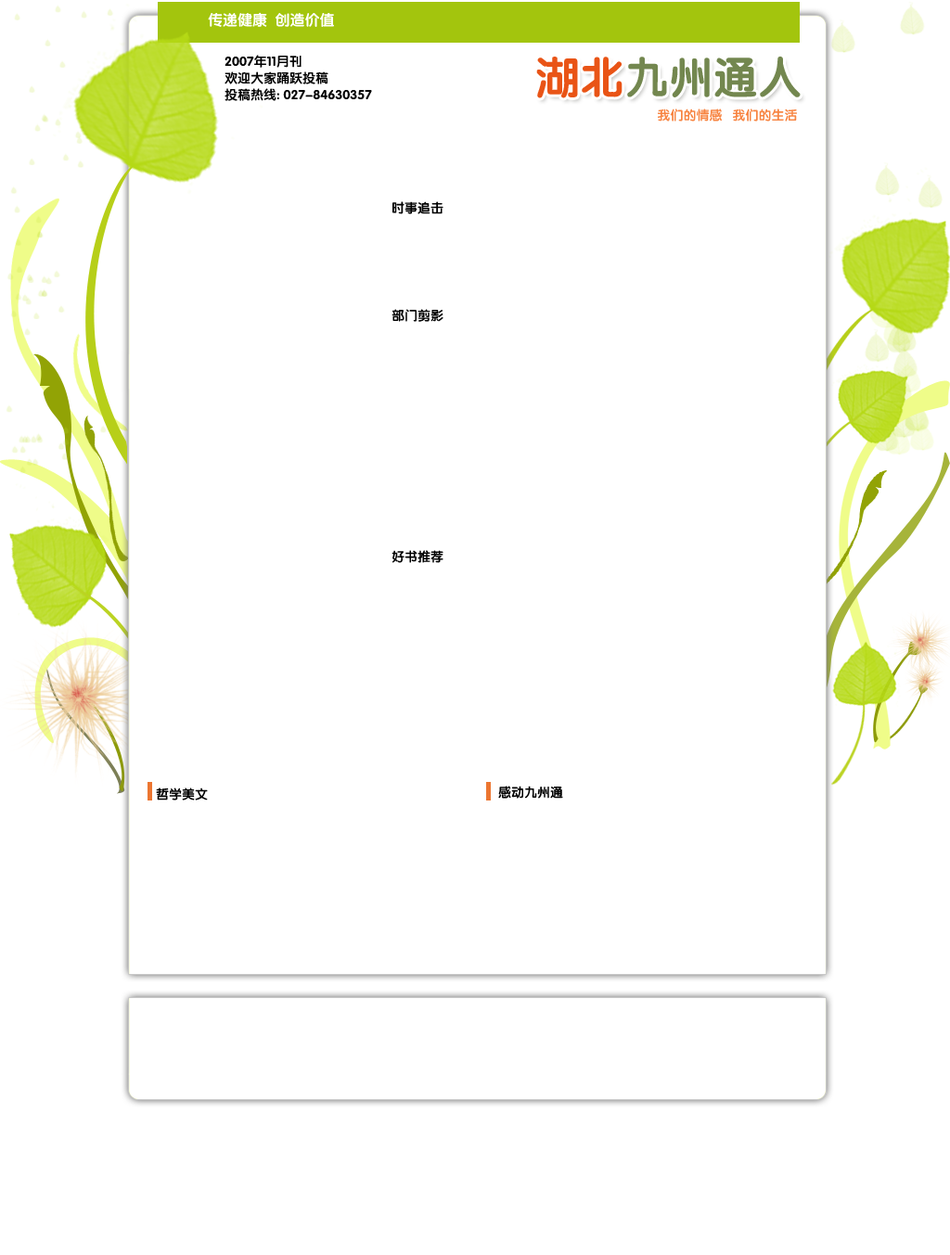
<style>
.page{position:relative;width:950px;height:1255px;background:#ffffff}
.page>*{position:absolute;margin:0}
.t1{font:14.8px "FZY4JW--GB1-0";color:#ffffff}
.t2{font:13px/16.7px "FZY4JW--GB1-0";color:#000000}
.t3{font:44.5px "FZY4JW--GB1-0";color:#73874f}
.t4{font:44.5px "FZY4JW--GB1-0";color:#e95416}
.t5{font:13px "FZY4JW--GB1-0";color:#f78441}
.t6{font:13px "FZY4JW--GB1-0";color:#000000}
</style>
<div class="page">
<p class="t1" style="left:208px;top:12px;width:126px;height:15px">传递健康  创造价值</p>
<p class="t2" style="left:225px;top:55px;width:147px;height:46px">2007年11月刊<br>欢迎大家踊跃投稿<br>投稿热线: 027-84630357</p>
<p class="t3" style="left:536px;top:56px;width:265px;height:42px"><span class="t4">湖北</span>九州通人</p>
<p class="t5" style="left:658px;top:109px;width:139px;height:13px">我们的情感   我们的生活</p>
<p class="t6" style="left:392px;top:201px;width:51px;height:13px">时事追击</p>
<p class="t6" style="left:391px;top:309px;width:52px;height:13px">部门剪影</p>
<p class="t6" style="left:391px;top:550px;width:52px;height:13px">好书推荐</p>
<p class="t6" style="left:498px;top:786px;width:65px;height:13px">感动九州通</p>
<p class="t6" style="left:156px;top:788px;width:52px;height:13px">哲学美文</p>
</div>
